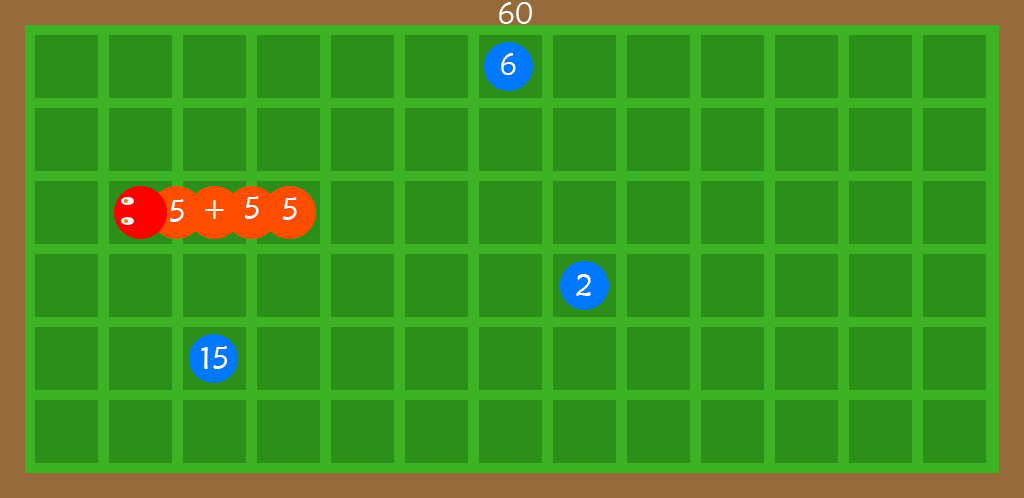
<style>
.page{position:relative;width:1024px;height:498px;background:#2c8f19}
.page>*{position:absolute;margin:0}
.t1{font:31px "MaiandraGD-Regular";color:#ffffff}
</style>
<div class="page">
<p class="t1" style="left:499px;top:2px;width:33px;height:22px">60</p>
<p class="t1" style="left:501px;top:53px;width:15px;height:22px">6</p>
<p class="t1" style="left:245px;top:196px;width:14px;height:23px">5</p>
<p class="t1" style="left:283px;top:197px;width:14px;height:23px">5</p>
<p class="t1" style="left:170px;top:199px;width:14px;height:23px">5</p>
<p class="t1" style="left:205px;top:200px;width:19px;height:19px">+</p>
<p class="t1" style="left:576px;top:274px;width:15px;height:22px">2</p>
<p class="t1" style="left:201px;top:346px;width:26px;height:23px">15</p>
</div>
